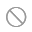
<style>
.page{position:relative;width:32px;height:32px;background:#ffffff}
.page>*{position:absolute;margin:0}
.t1{font:26px "ArialUnicodeMS";color:#999999}
</style>
<div class="page">
<p class="t1" style="left:6px;top:7px;width:21px;height:20px">⃠</p>
<p class="t1" style="left:6px;top:7px;width:21px;height:20px">⃠</p>
</div>
